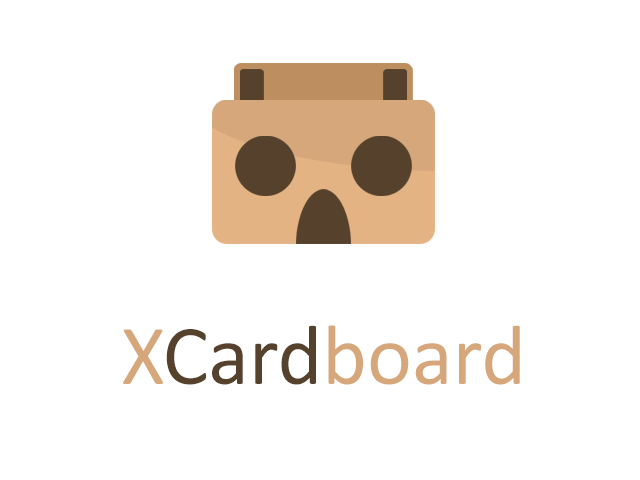
<style>
.page{position:relative;width:640px;height:480px;background:#ffffff}
.page>*{position:absolute;margin:0}
.t1{font:85.5px "Calibri";color:#d6a77a}
.t2{font:85.5px "Calibri";color:#56422c}
</style>
<div class="page">
<p class="t1" style="left:123px;top:325px;width:397px;height:60px">X<span class="t2">Card</span>board</p>
</div>
